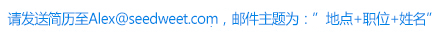
<style>
.page{position:relative;width:440px;height:39px;background:#ffffff}
.page>*{position:absolute;margin:0}
.t1{font:14.4px "MicrosoftYaHei";letter-spacing:-0.039em;color:#0084e6}
</style>
<div class="page">
<p class="t1" style="left:7px;top:11px;width:425px;height:15px">请发送简历至Alex@seedweet.com，邮件主题为：”地点+职位+姓名”</p>
</div>
